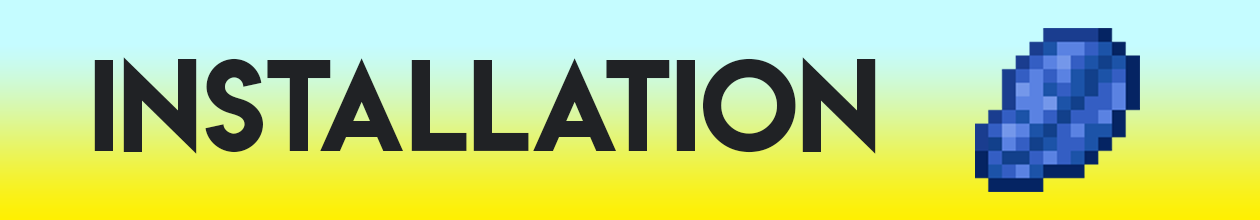
<style>
.page{position:relative;width:1260px;height:220px}
.page>*{position:absolute;margin:0}
.t1{font:115.2px "LemonMilk";color:#202225}
</style>
<div class="page">
<p class="t1" style="left:94px;top:57px;width:782px;height:97px">installation</p>
</div>
